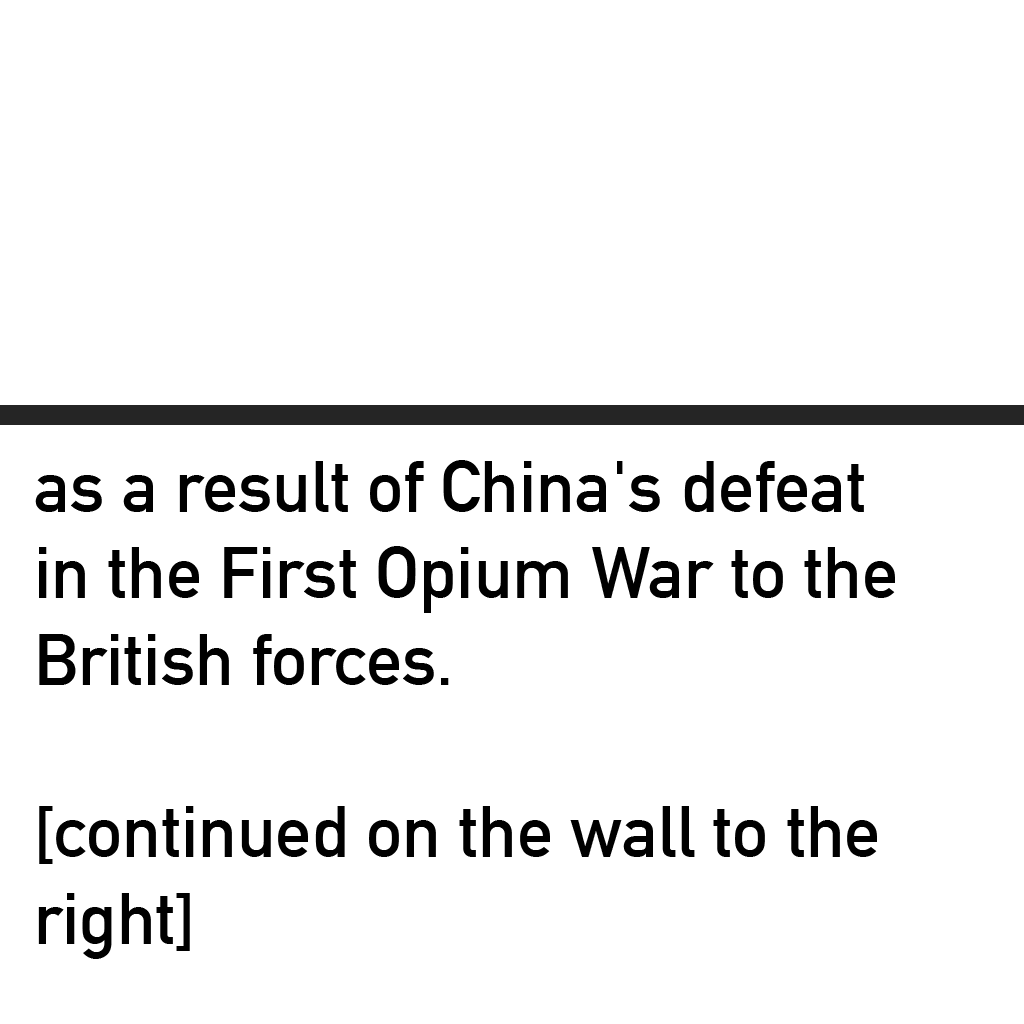
<style>
.page{position:relative;width:1024px;height:1024px;background:#ffffff}
.page>*{position:absolute;margin:0}
.t1{font:72px "DINAlternate-Bold";color:#000000}
</style>
<div class="page">
<p class="t1" style="left:35px;top:460px;width:860px;height:499px">as a result of China's defeat<br>in the First Opium War to the <br>British forces. <br><br>[continued on the wall to the<br>right]</p>
</div>
